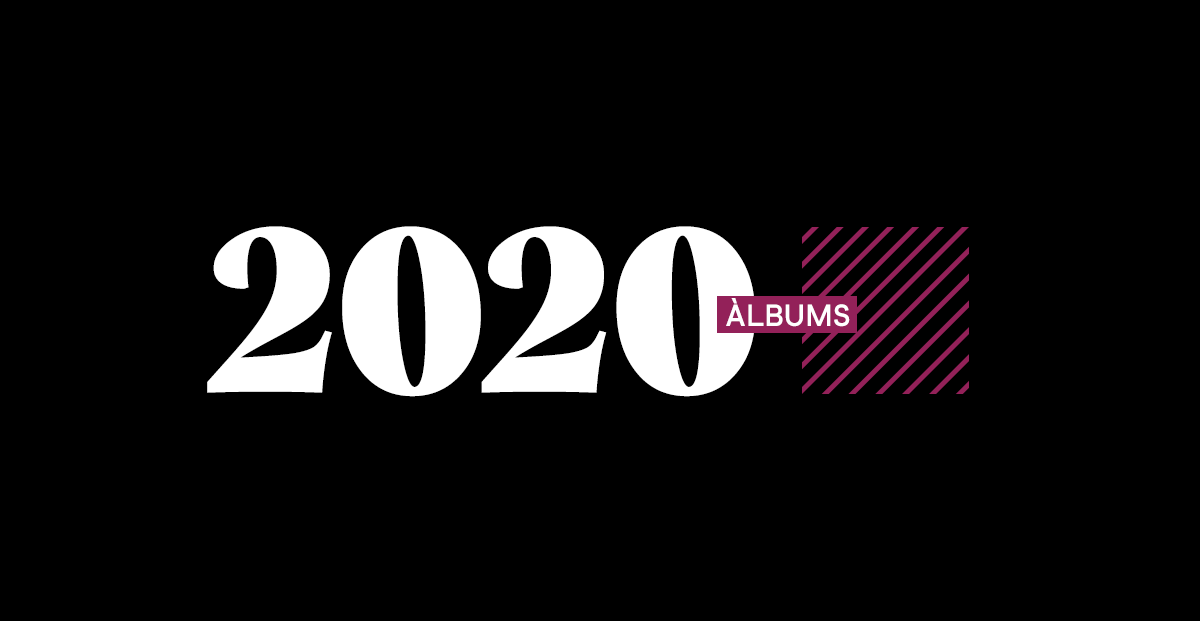
<style>
.page{position:relative;width:1200px;height:621px;background:#000000}
.page>*{position:absolute;margin:0}
.t1{font:236.1px "Vesterbro-Poster";letter-spacing:0.01em;color:#ffffff}
.t2{font:30px "CodanMedium-Regular";color:#ffffff}
</style>
<div class="page">
<p class="t1" style="left:207px;top:226px;width:548px;height:171px">2020</p>
<p class="t2" style="left:726px;top:298px;width:124px;height:29px">ÀLBUMS</p>
</div>
